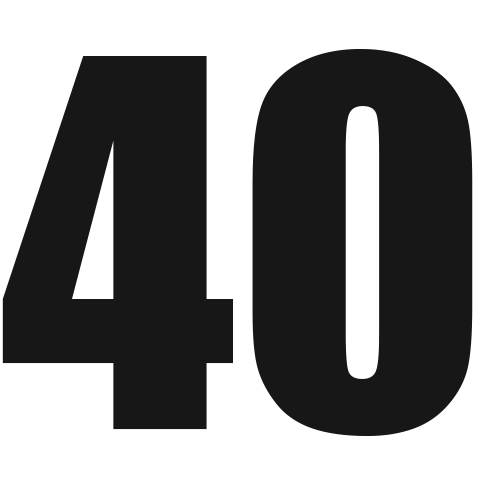
<style>
.page{position:relative;width:480px;height:480px;background:#171717}
.page>*{position:absolute;margin:0}
.t1{font:472.3px "Impact";color:#171717}
</style>
<div class="page">
<p class="t1" style="left:2px;top:49px;width:471px;height:387px">40</p>
</div>
